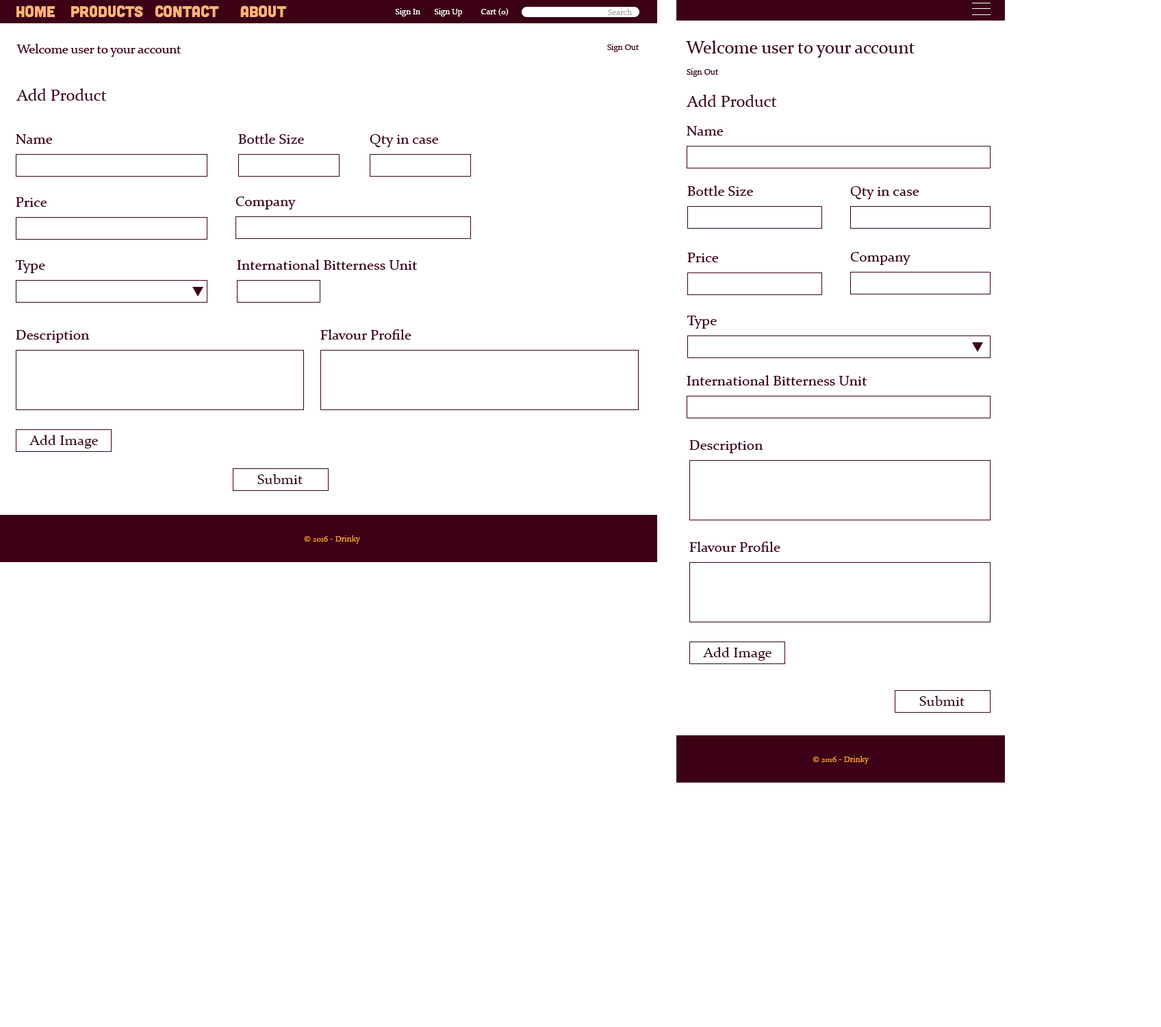
<style>
.page{position:relative;width:1161px;height:1027px;background:#ffffff}
.page>*{position:absolute;margin:0}
.t1{font:15.7px "Cubano-Regular";color:#ffb36f}
.t2{font:8.2px "Constantia";color:#ffffff}
.t3{font:8.2px "Constantia";color:#a8a8a8}
.t4{font:17.7px "Constantia";color:#3c0017}
.t5{font:12.7px "Constantia";color:#3c0017}
.t6{font:8.2px "Constantia";color:#3c0017}
.t7{font:16.3px "Constantia";color:#3c0017}
.t8{font:14.5px "Constantia";color:#3c0017}
.t9{font:8.2px "Constantia";color:#f89b1c}
</style>
<div class="page">
<p class="t1" style="left:16px;top:5px;width:39px;height:12px">Home</p>
<p class="t1" style="left:71px;top:5px;width:72px;height:12px">Products</p>
<p class="t1" style="left:155px;top:5px;width:64px;height:12px">Contact</p>
<p class="t1" style="left:240px;top:5px;width:46px;height:12px">About</p>
<p class="t2" style="left:395px;top:8px;width:25px;height:8px">Sign In</p>
<p class="t2" style="left:434px;top:8px;width:29px;height:8px">Sign Up</p>
<p class="t2" style="left:481px;top:8px;width:28px;height:8px">Cart (0)</p>
<p class="t3" style="left:608px;top:9px;width:24px;height:6px">Search</p>
<p class="t4" style="left:686px;top:40px;width:229px;height:18px">Welcome user to your account</p>
<p class="t5" style="left:16px;top:44px;width:165px;height:13px">Welcome user to your account</p>
<p class="t6" style="left:607px;top:44px;width:32px;height:8px">Sign Out</p>
<p class="t6" style="left:687px;top:68px;width:32px;height:9px">Sign Out</p>
<p class="t7" style="left:16px;top:88px;width:91px;height:13px">Add Product</p>
<p class="t7" style="left:687px;top:94px;width:90px;height:13px">Add Product</p>
<p class="t8" style="left:687px;top:126px;width:37px;height:10px">Name</p>
<p class="t8" style="left:16px;top:134px;width:37px;height:10px">Name</p>
<p class="t8" style="left:238px;top:134px;width:66px;height:10px">Bottle Size</p>
<p class="t8" style="left:370px;top:134px;width:69px;height:13px">Qty in case</p>
<p class="t8" style="left:687px;top:186px;width:66px;height:10px">Bottle Size</p>
<p class="t8" style="left:16px;top:197px;width:31px;height:10px">Price</p>
<p class="t8" style="left:236px;top:196px;width:60px;height:13px">Company</p>
<p class="t8" style="left:850px;top:186px;width:69px;height:13px">Qty in case</p>
<p class="t8" style="left:687px;top:253px;width:32px;height:9px">Price</p>
<p class="t8" style="left:850px;top:252px;width:61px;height:13px">Company</p>
<p class="t8" style="left:15px;top:260px;width:30px;height:13px">Type</p>
<p class="t8" style="left:237px;top:259px;width:181px;height:11px">International Bitterness Unit</p>
<p class="t8" style="left:687px;top:316px;width:30px;height:13px">Type</p>
<p class="t8" style="left:16px;top:330px;width:74px;height:13px">Description</p>
<p class="t8" style="left:320px;top:329px;width:91px;height:11px">Flavour Profile</p>
<p class="t8" style="left:687px;top:375px;width:180px;height:10px">International Bitterness Unit</p>
<p class="t8" style="left:29px;top:435px;width:69px;height:13px">Add Image</p>
<p class="t8" style="left:689px;top:440px;width:74px;height:13px">Description</p>
<p class="t8" style="left:257px;top:474px;width:46px;height:10px">Submit</p>
<p class="t9" style="left:304px;top:535px;width:56px;height:9px">© 2016 - Drinky</p>
<p class="t8" style="left:689px;top:542px;width:91px;height:10px">Flavour Profile</p>
<p class="t8" style="left:703px;top:647px;width:69px;height:14px">Add Image</p>
<p class="t8" style="left:919px;top:696px;width:46px;height:10px">Submit</p>
<p class="t9" style="left:813px;top:756px;width:56px;height:8px">© 2016 - Drinky</p>
</div>
